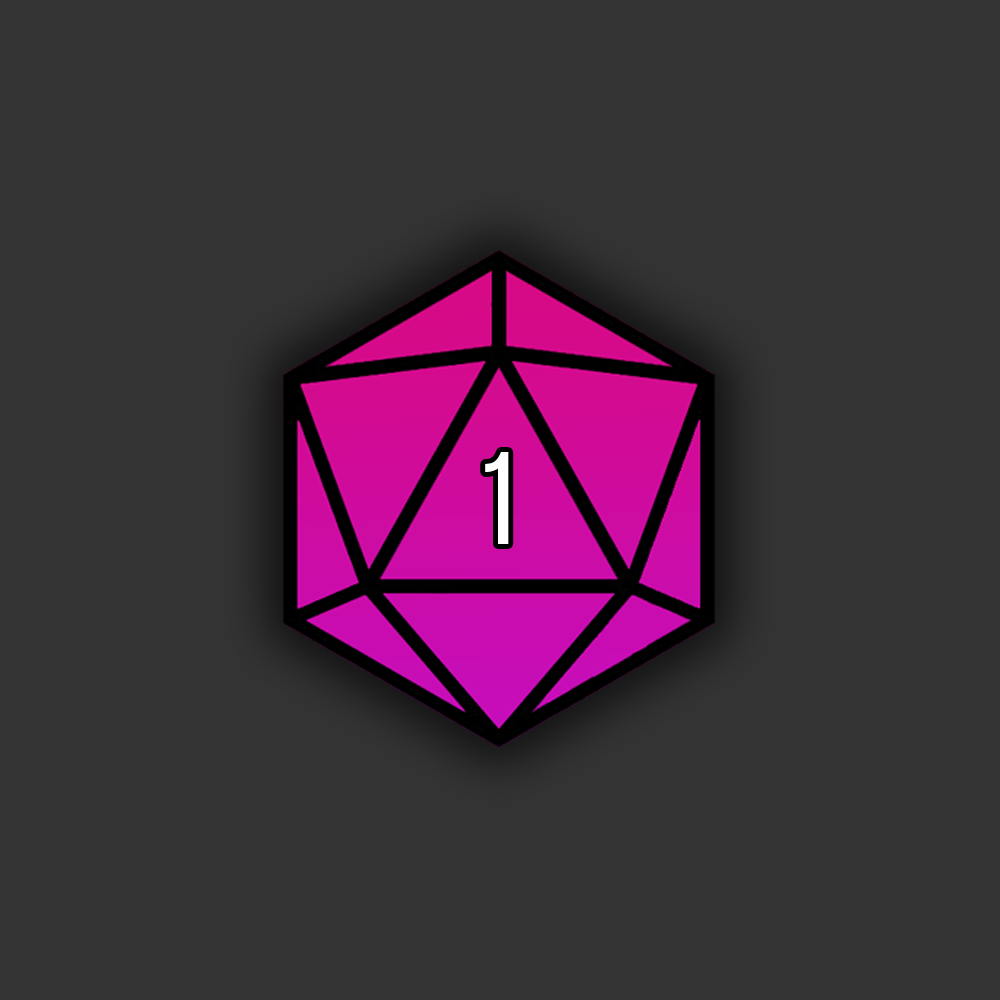
<style>
.page{position:relative;width:1000px;height:1000px;background:#333333}
.page>*{position:absolute;margin:0}
.t1{font:131.4px "BebasNeue-Regular";color:#ffffff}
</style>
<div class="page">
<p class="t1" style="left:485px;top:452px;width:24px;height:92px">1</p>
</div>
